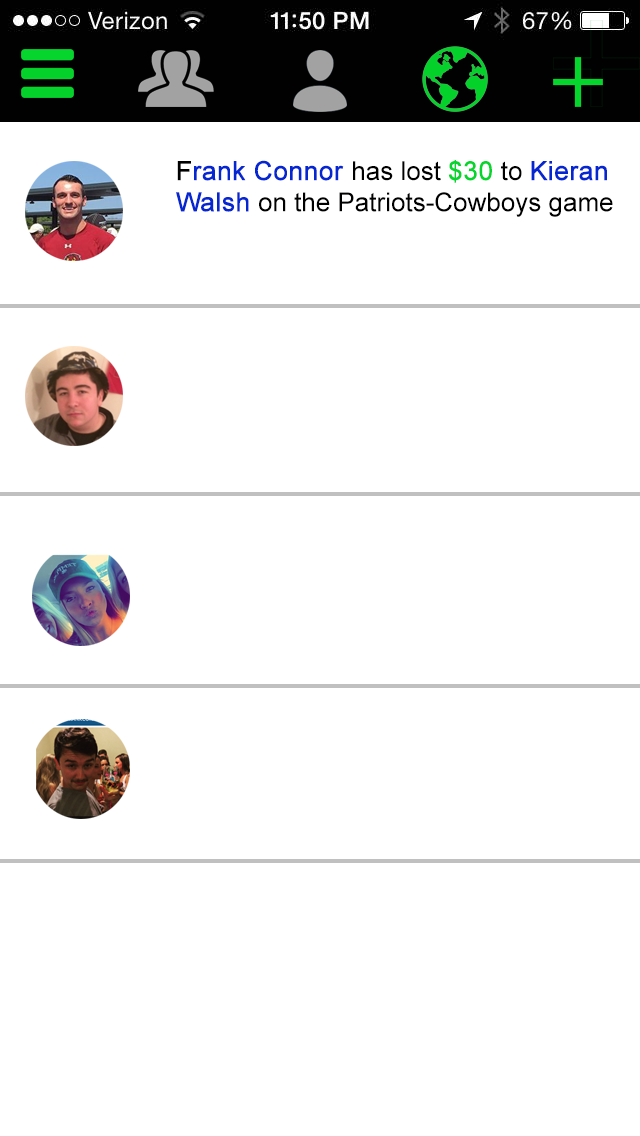
<style>
.page{position:relative;width:640px;height:1136px;background:#ffffff}
.page>*{position:absolute;margin:0}
.t1{font:26px "ArialMT";color:#000000}
.t2{font:26px "ArialMT";color:#000000;font-weight:bold}
.t3{font:26px "ArialMT";color:#0527d1;font-weight:bold}
.t4{font:26px "ArialMT";color:#05d52c;font-weight:bold}
</style>
<div class="page">
<p class="t1" style="left:176px;top:160px;width:437px;height:57px;text-align:right"><span class="t2">F</span><span class="t3">rank Connor </span>has lost <span class="t4">$30</span> to <span class="t3">Kieran Walsh</span> on the Patriots-Cowboys game</p>
</div>
